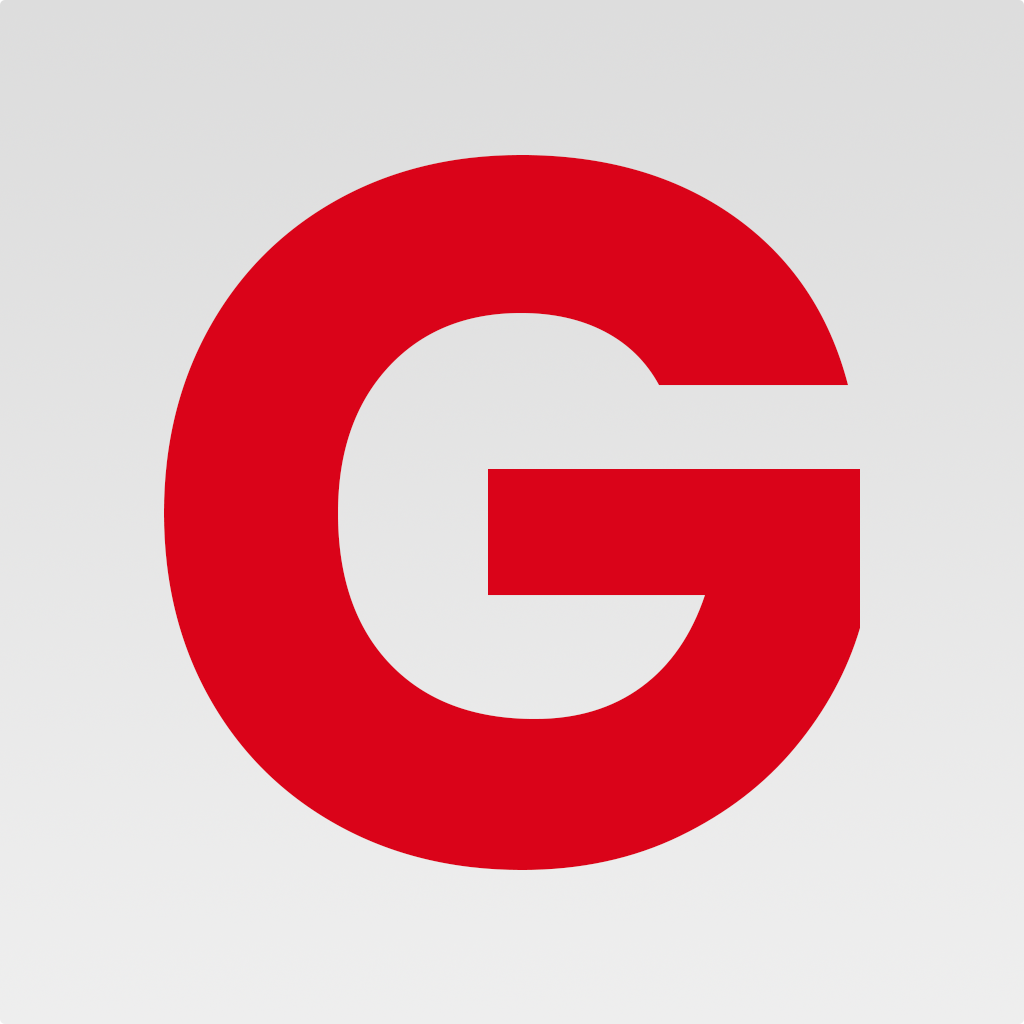
<style>
.page{position:relative;width:1024px;height:1024px;background:#da0319}
.page>*{position:absolute;margin:0}
.t1{font:1000px "Poppins-Bold";color:#da0319}
</style>
<div class="page">
<p class="t1" style="left:164px;top:155px;width:696px;height:715px">G</p>
</div>
